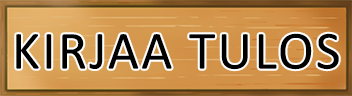
<style>
.page{position:relative;width:352px;height:96px}
.page>*{position:absolute;margin:0}
.t1{font:54px "Calibri";letter-spacing:0.04em;color:#000000}
</style>
<div class="page">
<p class="t1" style="left:16px;top:33px;width:323px;height:37px">KIRJAA TULOS</p>
</div>
